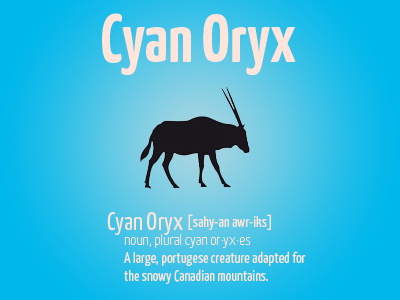
<style>
.page{position:relative;width:400px;height:300px}
.page>*{position:absolute;margin:0}
.t1{font:68px "YanoneKaffeesatz-Bold";color:#fde5dc}
.t2{font:15px "YanoneKaffeesatz-Regular";color:#fde5dc}
.t3{font:25px "YanoneKaffeesatz-Regular";color:#fde5dc}
.t4{font:15px "YanoneKaffeesatz-Thin";color:#fde5dc}
</style>
<div class="page">
<p class="t1" style="left:102px;top:13px;width:194px;height:62px">Cyan Oryx</p>
<p class="t2" style="left:107px;top:212px;width:164px;height:23px"><span class="t3">Cyan Oryx </span>[sahy-an awr-iks]</p>
<p class="t2" style="left:124px;top:234px;width:182px;height:50px"><span class="t4">noun, plural cyan or·yx·es<br></span>A large, portugese creature adapted for<br>the snowy Canadian mountains.</p>
</div>
